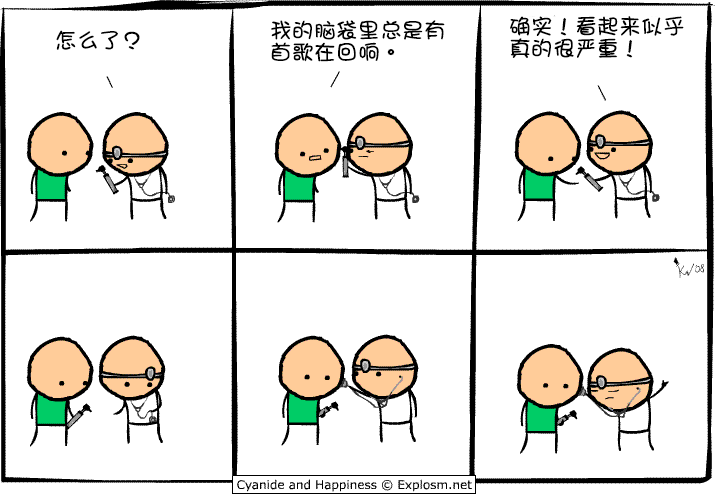
<style>
.page{position:relative;width:715px;height:500px;background:#ffffff}
.page>*{position:absolute;margin:0}
.t1{font:22px/22px "DFGirl";color:#000000}
.t2{font:22px "DFGirl";color:#000000}
</style>
<div class="page">
<p class="t1" style="left:510px;top:16px;width:174px;height:42px">确实！看起来似乎<br>真的很严重！</p>
<p class="t2" style="left:56px;top:30px;width:84px;height:20px">怎么了？</p>
<p class="t1" style="left:271px;top:20px;width:174px;height:42px">我的脑袋里总是有<br>首歌在回响。</p>
</div>
